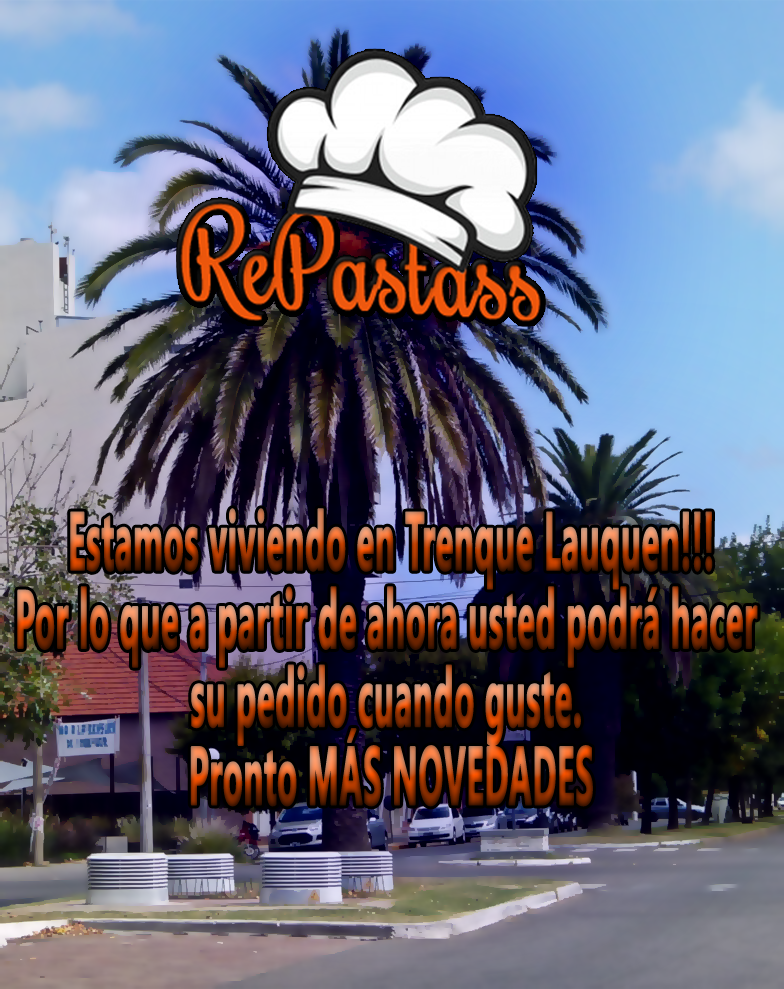
<style>
.page{position:relative;width:784px;height:989px}
.page>*{position:absolute;margin:0}
.t1{font:81.4px/78.2px "NirmalaUI-Bold";font-weight:bold;scale:0.4 1}
</style>
<div class="page">
<p class="t1" style="left:17px;top:508px;width:741px;height:299px;text-align:center">Estamos viviendo en Trenque Lauquen!!!<br>Por lo que a partir de ahora usted podrá hacer <br>su pedido cuando guste. <br>Pronto MÁS NOVEDADES</p>
</div>
